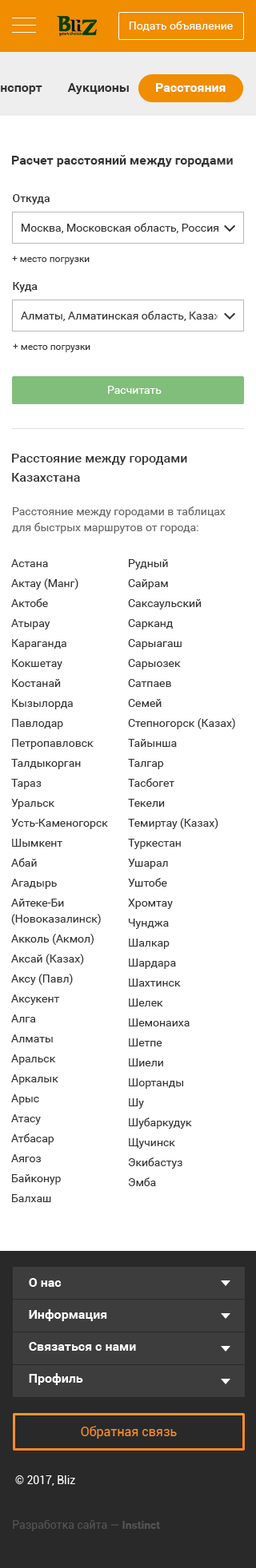
<style>
.page{position:relative;width:256px;height:1568px;background:#ffffff}
.page>*{position:absolute;margin:0}
.t1{font:12.8px "Roboto-Bold";color:#333333}
.t2{font:11.2px "Roboto-Medium";color:#333333}
.t3{font:11.2px "Roboto-Regular";color:#333333}
.t4{font:9.6px "Roboto-Regular";color:#333333}
.t5{font:11.2px "Roboto-Regular";color:#ffffff}
.t6{font:12.8px/19.2px "Roboto-Medium";color:#333333}
.t7{font:11.2px/16px "Roboto-Regular";color:#666666}
.t8{font:11.2px/16px "Roboto-Regular";color:#333333}
</style>
<div class="page">
<p class="t1" style="left:12px;top:155px;width:220px;height:12px">Расчет расстояний между городами</p>
<p class="t2" style="left:13px;top:194px;width:37px;height:10px">Откуда</p>
<p class="t3" style="left:22px;top:223px;width:196px;height:10px">Москва, Московская область, Россия</p>
<p class="t4" style="left:12px;top:256px;width:77px;height:8px">+ место погрузки</p>
<p class="t2" style="left:13px;top:282px;width:25px;height:10px">Куда</p>
<p class="t3" style="left:21px;top:311px;width:221px;height:10px">Алматы, Алматинская область, Казахстан</p>
<p class="t4" style="left:13px;top:343px;width:77px;height:9px">+ место погрузки</p>
<p class="t5" style="left:108px;top:386px;width:53px;height:8px">Расчитать</p>
<p class="t6" style="left:12px;top:454px;width:175px;height:28px">Расстояние между городами Казахстана</p>
<p class="t7" style="left:12px;top:506px;width:213px;height:28px">Расстояние между городами в таблицах для быстрых маршрутов от города:</p>
<p class="t8" style="left:11px;top:559px;width:97px;height:643px">Астана<br>Актау (Манг)<br>Актобе<br>Атырау<br>Караганда<br>Кокшетау<br>Костанай<br>Кызылорда<br>Павлодар<br>Петропавловск<br>Талдыкорган<br>Тараз<br>Уральск<br>Усть-Каменогорск<br>Шымкент<br>Абай<br>Агадырь<br>Айтеке-Би (Новоказалинск)<br>Акколь (Акмол)<br>Аксай (Казах)<br>Аксу (Павл)<br>Аксукент<br>Алга<br>Алматы<br>Аральск<br>Аркалык<br>Арыс<br>Атасу<br>Атбасар<br>Аягоз<br>Байконур<br>Балхаш</p>
<p class="t8" style="left:128px;top:559px;width:107px;height:627px">Рудный<br>Сайрам<br>Саксаульский<br>Сарканд<br>Сарыагаш<br>Сарыозек<br>Сатпаев<br>Семей<br>Степногорск (Казах)<br>Тайынша<br>Талгар<br>Тасбогет<br>Текели<br>Темиртау (Казах)<br>Туркестан<br>Ушарал<br>Уштобе<br>Хромтау<br>Чунджа<br>Шалкар<br>Шардара<br>Шахтинск<br>Шелек<br>Шемонаиха<br>Шетпе<br>Шиели<br>Шортанды<br>Шу<br>Шубаркудук<br>Щучинск<br>Экибастуз<br>Эмба</p>
</div>
